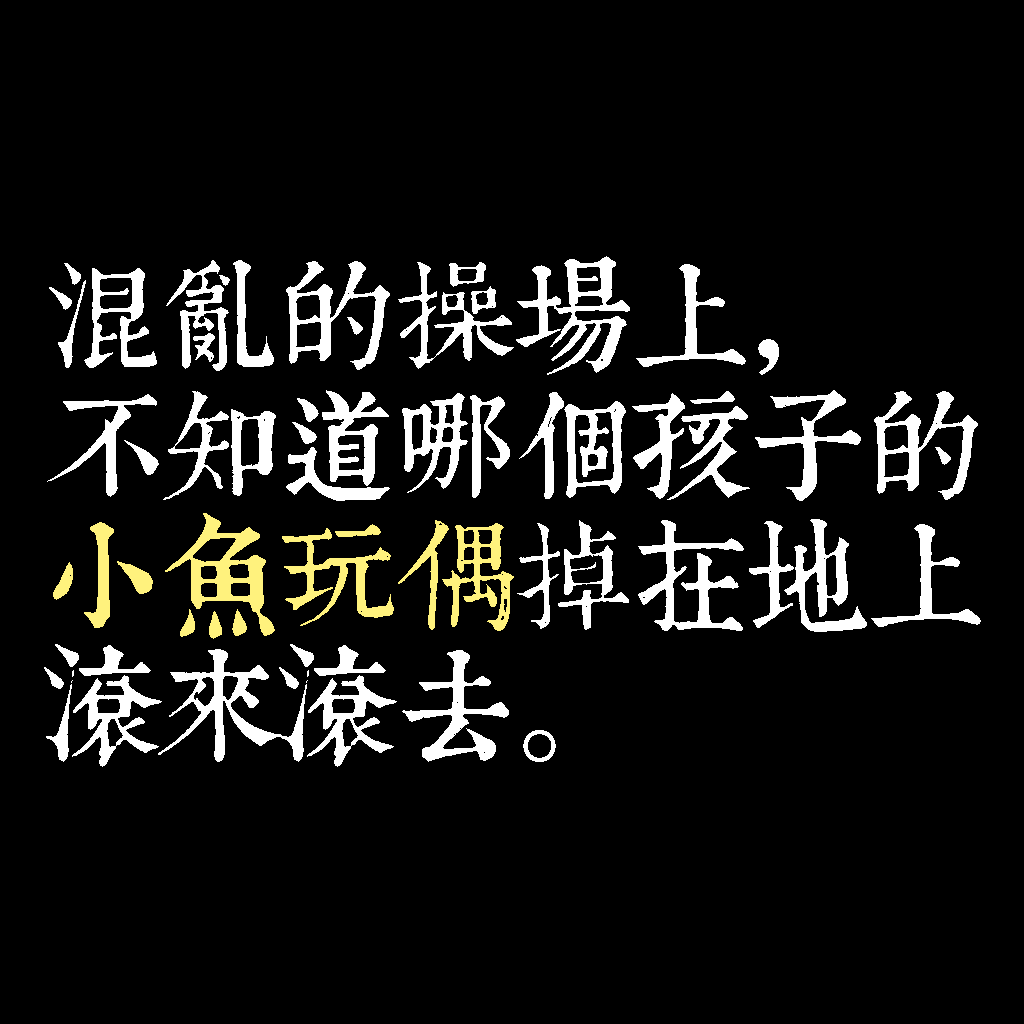
<style>
.page{position:relative;width:1024px;height:1024px;background:#000000}
.page>*{position:absolute;margin:0}
.t1{font:120px/130px "TpldKhangXiDictTrial";letter-spacing:-0.02em;color:#ffffff}
.t2{font:120px/130px "TpldKhangXiDictTrial";letter-spacing:-0.02em;color:#fff27d}
</style>
<div class="page">
<p class="t1" style="left:44px;top:256px;width:937px;height:511px">混亂的操場上，<br>不知道哪個孩子的<br><span class="t2">小魚玩偶</span>掉在地上<br>滾來滾去。</p>
</div>
